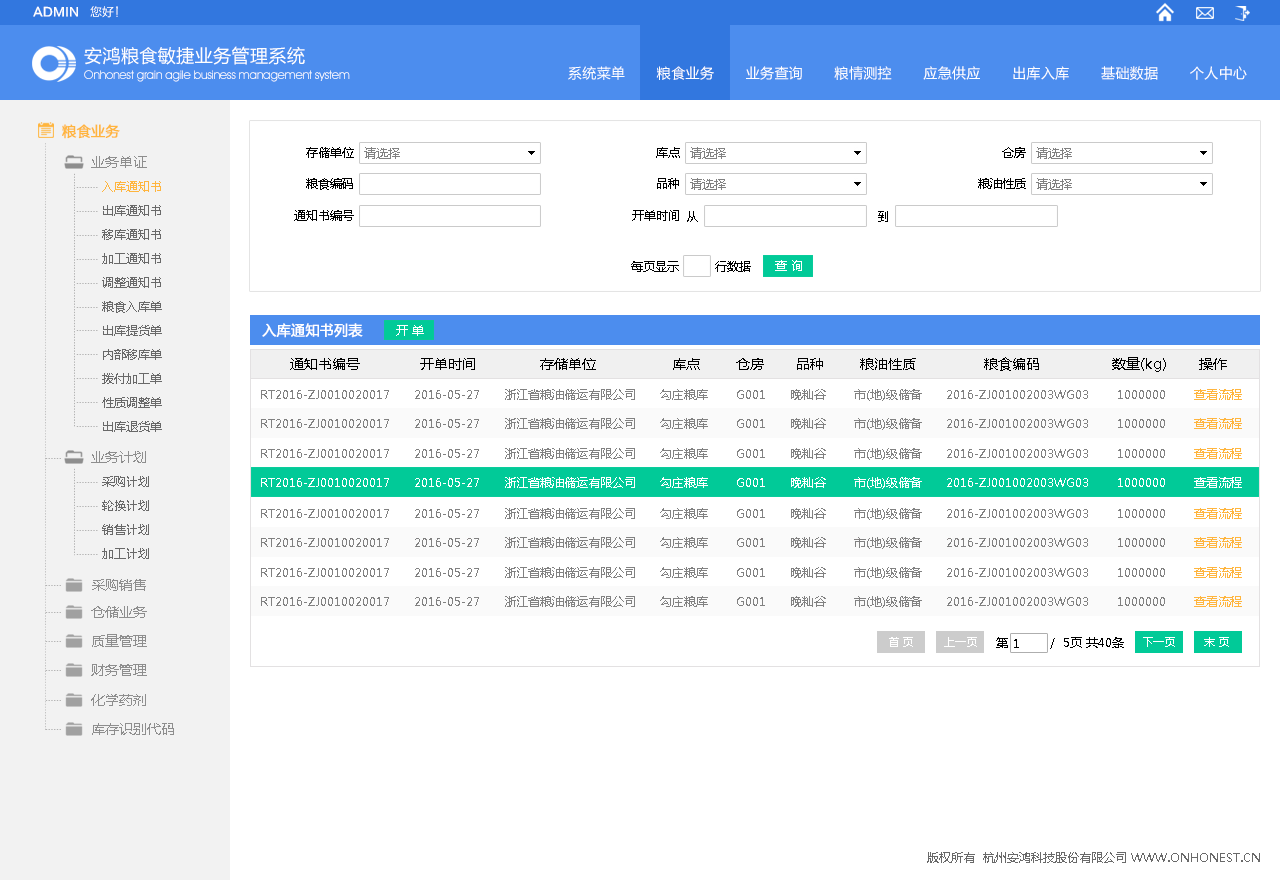
<style>
.page{position:relative;width:1280px;height:880px;background:#ffffff}
.page>*{position:absolute;margin:0}
.t1{font:12px "FZLTCHK--GBK1-0";color:#ffffff}
.t2{font:12px "FZLTHK--GBK1-0";color:#ffffff}
.t3{font:18px "MicrosoftYaHei";letter-spacing:0.025em;color:#ffffff}
.t4{font:12px "AvantGardeITCbyBT-Book";letter-spacing:-0.025em;color:#ffffff}
.t5{font:14px "MicrosoftYaHei";letter-spacing:0.025em;color:#ffffff}
.t6{font:14px "MicrosoftYaHei";color:#ffb53e;font-weight:bold}
.t7{font:12px "MicrosoftYaHei";color:#000000}
.t8{font:12px "MicrosoftYaHei";color:#818181}
.t9{font:14px "MicrosoftYaHei";color:#8e8e8e}
.t10{font:12px/24px "MicrosoftYaHei";color:#696969}
.t11{font:12px/24px "MicrosoftYaHei";color:#ffb53e}
.t12{font:12px "MicrosoftYaHei";color:#ffffff}
.t13{font:14px "MicrosoftYaHei";color:#ffffff;font-weight:bold}
.t14{font:14px "MicrosoftYaHei";color:#000000}
.t15{font:12px "MicrosoftYaHei";color:#ffb53e}
.t16{font:11px "MicrosoftYaHei";color:#ffffff}
.t17{font:12px "MicrosoftYaHei";color:#696969}
</style>
<div class="page">
<p class="t1" style="left:33px;top:6px;width:85px;height:12px">ADMIN   <span class="t2">您好！</span></p>
<p class="t3" style="left:84px;top:46px;width:221px;height:19px">安鸿粮食敏捷业务管理系统</p>
<p class="t4" style="left:84px;top:70px;width:266px;height:12px">Onhonest grain agile business management system</p>
<p class="t5" style="left:568px;top:66px;width:679px;height:14px">系统菜单       粮食业务       业务查询       粮情测控       应急供应       出库入库       基础数据       个人中心</p>
<p class="t6" style="left:62px;top:124px;width:58px;height:15px">粮食业务</p>
<p class="t7" style="left:306px;top:147px;width:48px;height:11px">存储单位</p>
<p class="t8" style="left:364px;top:147px;width:36px;height:12px"><span class="t7"> </span>请选择</p>
<p class="t7" style="left:656px;top:147px;width:24px;height:11px">库点</p>
<p class="t8" style="left:690px;top:147px;width:36px;height:12px"><span class="t7"> </span>请选择</p>
<p class="t7" style="left:1002px;top:147px;width:24px;height:11px">仓房</p>
<p class="t8" style="left:1036px;top:147px;width:36px;height:12px"><span class="t7"> </span>请选择</p>
<p class="t9" style="left:91px;top:156px;width:56px;height:12px">业务单证</p>
<p class="t10" style="left:102px;top:181px;width:60px;height:251px"><span class="t11">入库通知书<br></span>出库通知书<br>移库通知书<br>加工通知书<br>调整通知书<br>粮食入库单<br>出库提货单<br>内部移库单<br>拨付加工单<br>性质调整单<br>出库退货单</p>
<p class="t7" style="left:306px;top:178px;width:47px;height:12px">粮食编码</p>
<p class="t7" style="left:657px;top:178px;width:22px;height:11px">品种</p>
<p class="t8" style="left:690px;top:178px;width:36px;height:12px"><span class="t7"> </span>请选择</p>
<p class="t7" style="left:978px;top:178px;width:48px;height:11px">粮油性质</p>
<p class="t8" style="left:1036px;top:178px;width:36px;height:12px"><span class="t7"> </span>请选择</p>
<p class="t7" style="left:294px;top:210px;width:60px;height:11px">通知书编号</p>
<p class="t7" style="left:632px;top:210px;width:47px;height:11px">开单时间</p>
<p class="t7" style="left:687px;top:211px;width:11px;height:11px">从</p>
<p class="t7" style="left:878px;top:211px;width:10px;height:11px">到</p>
<p class="t7" style="left:631px;top:261px;width:120px;height:11px">每页显示         行数据</p>
<p class="t12" style="left:775px;top:260px;width:27px;height:11px">查 询</p>
<p class="t13" style="left:262px;top:323px;width:101px;height:15px">入库通知书列表</p>
<p class="t12" style="left:396px;top:325px;width:28px;height:11px">开 单</p>
<p class="t14" style="left:290px;top:357px;width:937px;height:15px">通知书编号               开单时间                存储单位                   库点         仓房        品种         粮油性质                 粮食编码                  数量(kg)        操作</p>
<p class="t8" style="left:261px;top:389px;width:981px;height:12px">RT2016-ZJ0010020017      2016-05-27      浙江省粮油储运有限公司      勾庄粮库       G001      晚籼谷       市(地)级储备      2016-ZJ001002003WG03       1000000       <span class="t15">查看流程</span></p>
<p class="t8" style="left:261px;top:418px;width:981px;height:12px">RT2016-ZJ0010020017      2016-05-27      浙江省粮油储运有限公司      勾庄粮库       G001      晚籼谷       市(地)级储备      2016-ZJ001002003WG03       1000000       <span class="t15">查看流程</span></p>
<p class="t8" style="left:261px;top:448px;width:981px;height:12px">RT2016-ZJ0010020017      2016-05-27      浙江省粮油储运有限公司      勾庄粮库       G001      晚籼谷       市(地)级储备      2016-ZJ001002003WG03       1000000       <span class="t15">查看流程</span></p>
<p class="t9" style="left:91px;top:451px;width:55px;height:12px">业务计划</p>
<p class="t10" style="left:102px;top:476px;width:47px;height:83px">采购计划<br>轮换计划<br>销售计划<br>加工计划</p>
<p class="t12" style="left:261px;top:477px;width:981px;height:12px">RT2016-ZJ0010020017      2016-05-27      浙江省粮油储运有限公司      勾庄粮库       G001      晚籼谷       市(地)级储备      2016-ZJ001002003WG03       1000000       查看流程</p>
<p class="t8" style="left:261px;top:508px;width:981px;height:12px">RT2016-ZJ0010020017      2016-05-27      浙江省粮油储运有限公司      勾庄粮库       G001      晚籼谷       市(地)级储备      2016-ZJ001002003WG03       1000000       <span class="t15">查看流程</span></p>
<p class="t8" style="left:261px;top:537px;width:981px;height:12px">RT2016-ZJ0010020017      2016-05-27      浙江省粮油储运有限公司      勾庄粮库       G001      晚籼谷       市(地)级储备      2016-ZJ001002003WG03       1000000       <span class="t15">查看流程</span></p>
<p class="t8" style="left:261px;top:567px;width:981px;height:12px">RT2016-ZJ0010020017      2016-05-27      浙江省粮油储运有限公司      勾庄粮库       G001      晚籼谷       市(地)级储备      2016-ZJ001002003WG03       1000000       <span class="t15">查看流程</span></p>
<p class="t9" style="left:92px;top:579px;width:54px;height:12px">采购销售</p>
<p class="t9" style="left:91px;top:606px;width:56px;height:12px">仓储业务</p>
<p class="t8" style="left:261px;top:596px;width:981px;height:12px">RT2016-ZJ0010020017      2016-05-27      浙江省粮油储运有限公司      勾庄粮库       G001      晚籼谷       市(地)级储备      2016-ZJ001002003WG03       1000000       <span class="t15">查看流程</span></p>
<p class="t9" style="left:92px;top:634px;width:55px;height:13px">质量管理</p>
<p class="t16" style="left:889px;top:637px;width:24px;height:10px">首 页</p>
<p class="t16" style="left:944px;top:637px;width:33px;height:10px">上一页</p>
<p class="t7" style="left:996px;top:637px;width:12px;height:11px">第</p>
<p class="t7" style="left:1014px;top:639px;width:5px;height:9px">1</p>
<p class="t7" style="left:1050px;top:637px;width:74px;height:12px">/  5页 共40条</p>
<p class="t16" style="left:1143px;top:637px;width:32px;height:10px">下一页</p>
<p class="t16" style="left:1204px;top:637px;width:25px;height:10px">末 页</p>
<p class="t9" style="left:91px;top:664px;width:56px;height:12px">财务管理</p>
<p class="t9" style="left:91px;top:694px;width:55px;height:12px">化学药剂</p>
<p class="t9" style="left:92px;top:723px;width:82px;height:12px">库存识别代码</p>
<p class="t17" style="left:927px;top:852px;width:333px;height:11px">版权所有  杭州安鸿科技股份有限公司 WWW.ONHONEST.CN</p>
</div>
